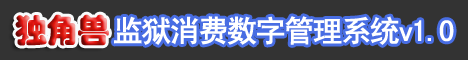
<style>
.page{position:relative;width:468px;height:60px;background:#333333}
.page>*{position:absolute;margin:0}
.t1{font:30px "SimHei";letter-spacing:-0.075em;color:#ffffff;font-weight:bold}
</style>
<div class="page">
<p class="t1" style="left:114px;top:16px;width:340px;height:29px">监狱消费数字管理系统v1.0</p>
</div>
